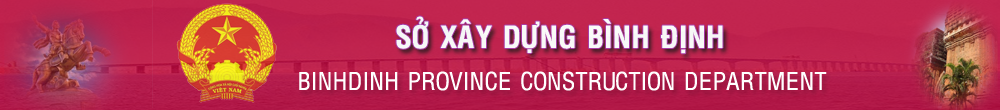
<style>
.page{position:relative;width:1000px;height:110px}
.page>*{position:absolute;margin:0}
.t1{font:30px "VNI-Helve-Condense-Bold";color:#ffffff}
.t2{font:24px "VNI-Helve-Condense";color:#ffffff}
</style>
<div class="page">
<p class="t1" style="left:396px;top:16px;width:327px;height:38px">SÔÛ XAÂY DÖÏNG BÌNH ÑÒNH</p>
<p class="t2" style="left:299px;top:71px;width:528px;height:20px">BINHDINH PROVINCE CONSTRUCTION DEPARTMENT</p>
</div>
